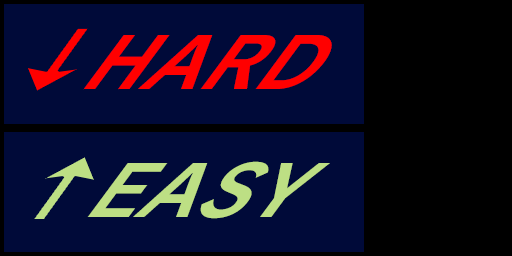
<style>
.page{position:relative;width:512px;height:256px;background:#000a39}
.page>*{position:absolute;margin:0}
.t1{font:86.1px "RodinProN-B";letter-spacing:0.02em;color:#ff0000;scale:0.87 1}
.t2{font:86.1px "RodinProN-B";letter-spacing:0.02em;color:#bddf84;scale:0.87 1}
</style>
<div class="page">
<p class="t1" style="left:83px;top:35px;width:249px;height:55px">HARD</p>
<p class="t2" style="left:87px;top:161px;width:243px;height:58px">EASY</p>
</div>
